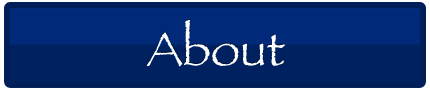
<style>
.page{position:relative;width:430px;height:90px;background:#002160}
.page>*{position:absolute;margin:0}
.t1{font:48px "Papyrus";color:#ffffff}
</style>
<div class="page">
<p class="t1" style="left:146px;top:20px;width:139px;height:47px">About</p>
</div>
